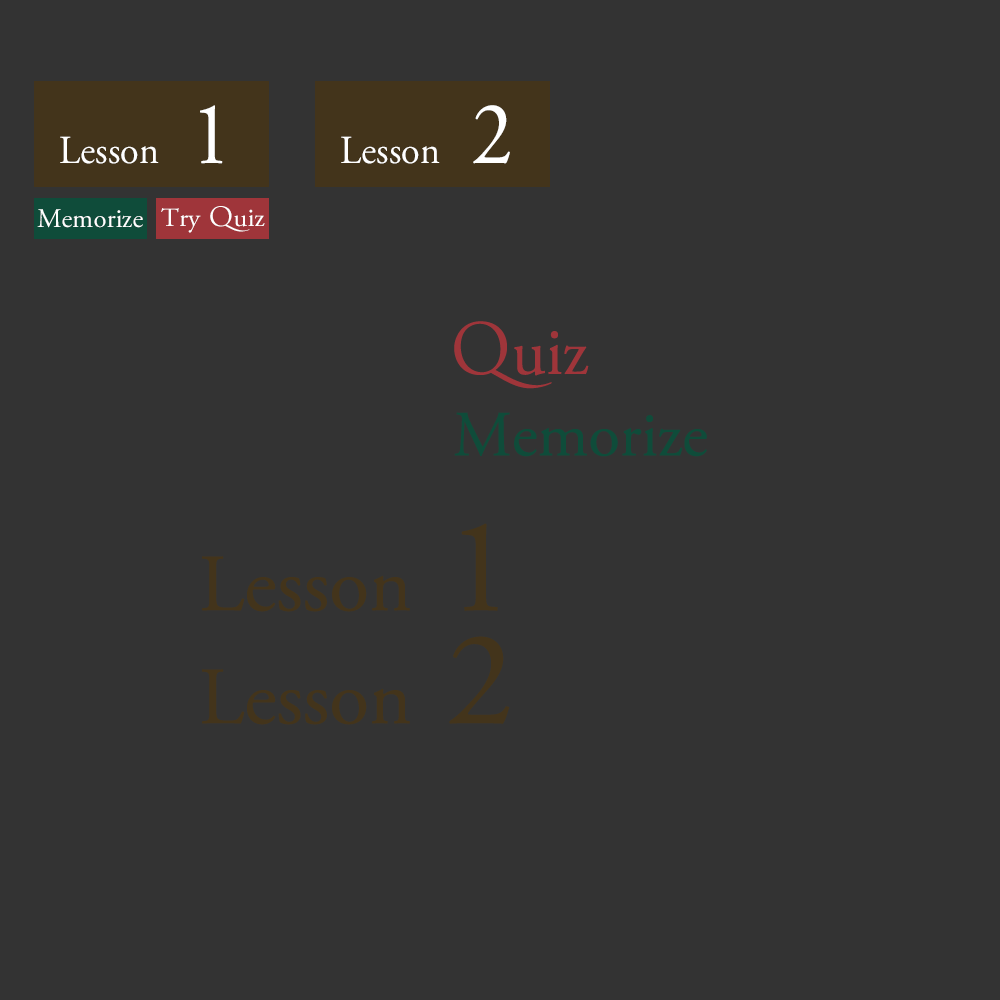
<style>
.page{position:relative;width:1000px;height:1000px;background:#333333}
.page>*{position:absolute;margin:0}
.t1{font:90.4px "AGaramondPro-Regular";color:#ffffff;scale:0.93 1}
.t2{font:39.7px "AGaramondPro-Regular";color:#ffffff;scale:0.97 1}
.t3{font:27px "AGaramondPro-Regular";color:#ffffff}
.t4{font:26px "AGaramondPro-Regular";color:#ffffff;scale:1.04 1}
.t5{font:26px "TrajanPro-Regular";color:#ffffff;scale:1.04 1}
.t6{font:68.3px "AGaramondPro-Regular";color:#9f353a}
.t7{font:68.3px "TrajanPro-Regular";color:#9f353a}
.t8{font:64.2px "AGaramondPro-Regular";color:#0f4c3a}
.t9{font:81px "AGaramondPro-Regular";color:#43341b}
.t10{font:135.1px "AGaramondPro-Regular";color:#43341b}
</style>
<div class="page">
<p class="t1" style="left:200px;top:105px;width:23px;height:59px">1</p>
<p class="t1" style="left:473px;top:105px;width:37px;height:59px">2</p>
<p class="t2" style="left:60px;top:136px;width:99px;height:28px">Lesson</p>
<p class="t2" style="left:341px;top:136px;width:99px;height:28px">Lesson</p>
<p class="t3" style="left:37px;top:209px;width:106px;height:19px">Memorize</p>
<p class="t4" style="left:161px;top:206px;width:104px;height:27px">Try<span class="t5"> Q</span>uiz</p>
<p class="t6" style="left:454px;top:321px;width:135px;height:68px"><span class="t7">Q</span>uiz</p>
<p class="t8" style="left:454px;top:412px;width:253px;height:45px">Memorize</p>
<p class="t9" style="left:202px;top:523px;width:296px;height:89px">Lesson<span class="t10"> 1</span></p>
<p class="t9" style="left:202px;top:636px;width:308px;height:89px">Lesson<span class="t10"> 2</span></p>
</div>
